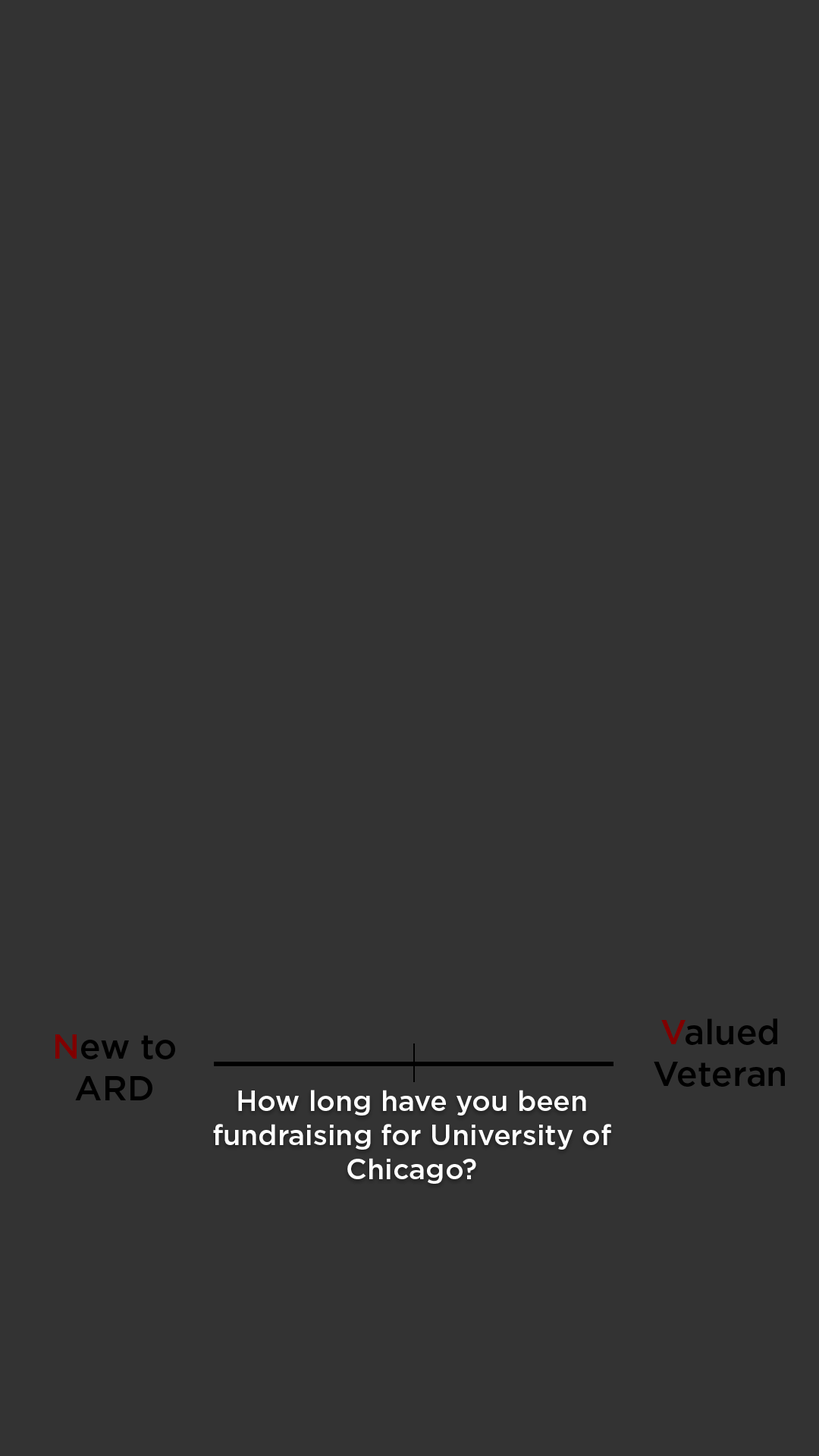
<style>
.page{position:relative;width:819px;height:1456px;background:#333333}
.page>*{position:absolute;margin:0}
.t1{font:34.8px "Gotham-Medium";color:#000000}
.t2{font:34.8px "Gotham-Medium";color:#800000}
.t3{font:28.4px "Gotham-Medium";color:#fefefe}
</style>
<div class="page">
<p class="t1" style="left:654px;top:1018px;width:131px;height:69px;text-align:center"><span class="t2">V</span>alued Veteran</p>
<p class="t1" style="left:55px;top:1034px;width:120px;height:66px;text-align:center"><span class="t2">N</span>ew to ARD</p>
<p class="t3" style="left:213px;top:1090px;width:398px;height:94px;text-align:center">How long have you been fundraising for University of Chicago?</p>
</div>
